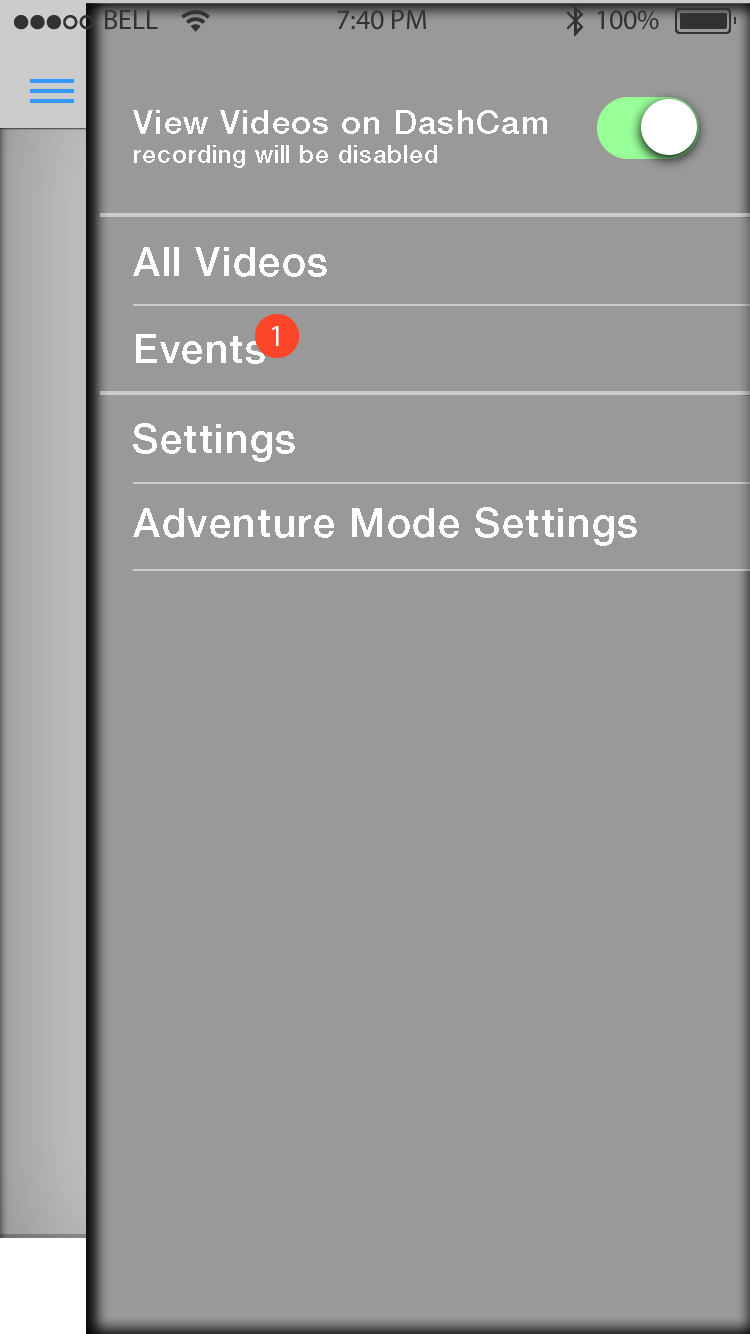
<style>
.page{position:relative;width:750px;height:1334px;background:#999999}
.page>*{position:absolute;margin:0}
.t1{font:24px/28.8px "HelveticaNeueLTStd-Md";letter-spacing:0.04em;color:#ffffff}
.t2{font:33px/39.6px "HelveticaNeueLTStd-Md";letter-spacing:0.04em;color:#ffffff}
.t3{font:40px "HelveticaNeueLTStd-Md";letter-spacing:0.04em;color:#ffffff}
.t4{font:30px "MyriadPro-Regular";letter-spacing:-0.01em;color:#ffffff}
</style>
<div class="page">
<p class="t1" style="left:133px;top:110px;width:414px;height:58px"><span class="t2">View Videos on DashCam<br></span>recording will be disabled</p>
<p class="t3" style="left:133px;top:247px;width:194px;height:30px">All Videos</p>
<p class="t4" style="left:272px;top:326px;width:7px;height:20px">1</p>
<p class="t3" style="left:136px;top:334px;width:129px;height:30px">Events</p>
<p class="t3" style="left:133px;top:423px;width:162px;height:39px">Settings</p>
<p class="t3" style="left:133px;top:507px;width:504px;height:39px">Adventure Mode Settings</p>
</div>
